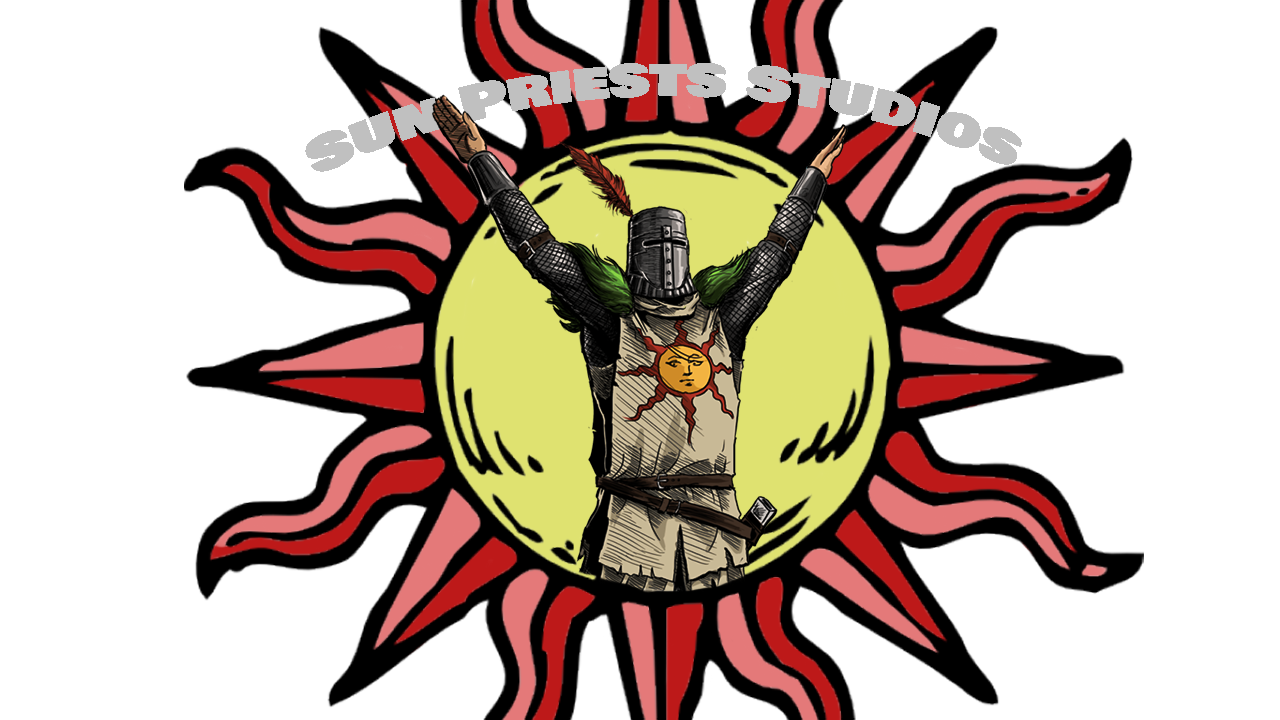
<style>
.page{position:relative;width:1280px;height:720px;background:#ffffff}
.page>*{position:absolute;margin:0}
.t1{font:48px "BowlbyOneSC-Regular";color:#c0c0c0}
</style>
<div class="page">
<p class="t1" style="left:305px;top:63px;width:717px;height:109px;rotate:3deg">Sun Priests Studios</p>
</div>
